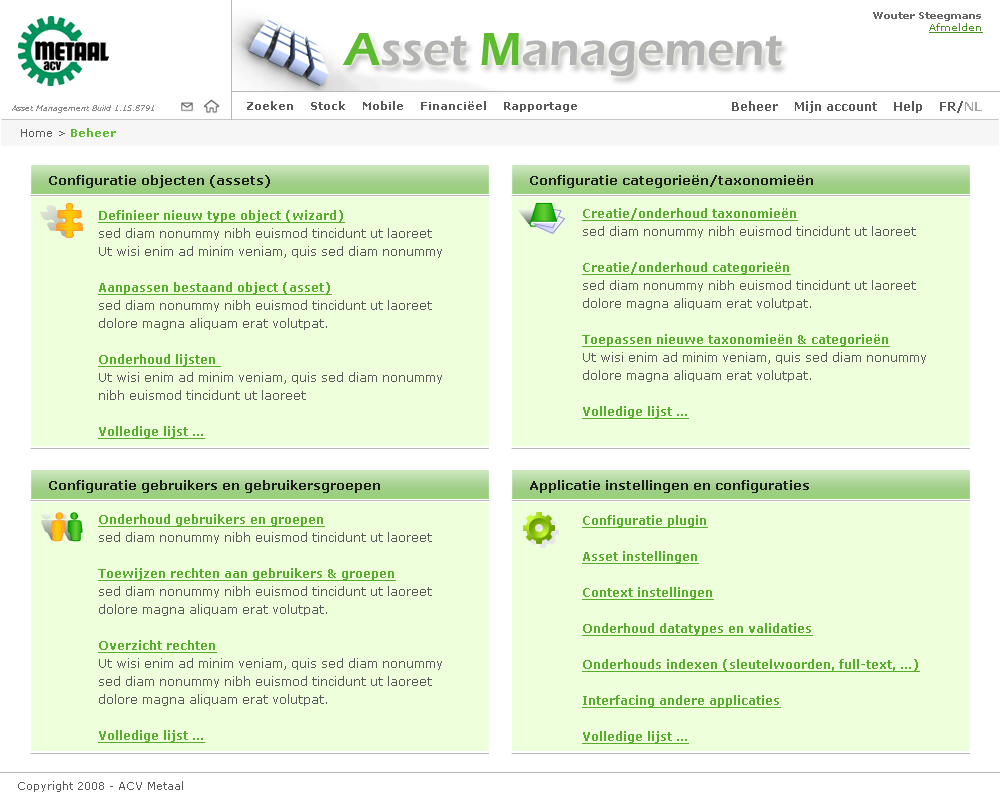
<style>
.page{position:relative;width:1000px;height:800px;background:#edffdb}
.page>*{position:absolute;margin:0}
.t1{font:10px "Verdana-Bold";color:#666666}
.t2{font:10px "Verdana";color:#488f24;text-decoration:underline}
.t3{font:48px "ErasITC-Demi";color:#b3b3b3}
.t4{font:48px "ErasITC-Demi";color:#5eba2f}
.t5{font:11px "Verdana-Bold";color:#595959}
.t6{font:12px "Verdana-Bold";color:#595959}
.t7{font:12px "Verdana-Bold";color:#a4a4a4}
.t8{font:8px "Verdana-Italic";color:#8c8c8c}
.t9{font:11px "Verdana";color:#595959}
.t10{font:11px "Verdana-Bold";color:#5eba2f}
.t11{font:13px "Verdana-Bold";color:#1e1e1e}
.t12{font:12px/18px "Verdana";color:#595959}
.t13{font:12px/18px "Verdana-Bold";color:#57ad2c;text-decoration:underline}
</style>
<div class="page">
<p class="t1" style="left:873px;top:12px;width:110px;height:21px;text-align:right">Wouter Steegmans<br><span class="t2">Afmelden</span></p>
<p class="t3" style="left:342px;top:33px;width:440px;height:44px"><span class="t4">A</span>sset <span class="t4">M</span>anagement</p>
<p class="t5" style="left:247px;top:101px;width:330px;height:11px">Zoeken    Stock    Mobile    Financiëel    Rapportage</p>
<p class="t6" style="left:732px;top:101px;width:250px;height:12px">Beheer    Mijn account    Help    FR/<span class="t7">NL</span></p>
<p class="t8" style="left:12px;top:105px;width:142px;height:8px">Asset Management Build 1.15.8791</p>
<p class="t9" style="left:21px;top:128px;width:95px;height:9px">Home &gt; <span class="t10">Beheer</span></p>
<p class="t11" style="left:49px;top:175px;width:221px;height:13px">Configuratie objecten (assets)</p>
<p class="t11" style="left:530px;top:175px;width:283px;height:13px">Configuratie categorieën/taxonomieën</p>
<p class="t12" style="left:582px;top:208px;width:344px;height:211px"><span class="t13">Creatie/onderhoud taxonomieën<br></span>sed diam nonummy nibh euismod tincidunt ut laoreet <br><br><span class="t13">Creatie/onderhoud categorieën<br></span>sed diam nonummy nibh euismod tincidunt ut laoreet <br>dolore magna aliquam erat volutpat. <br><br><span class="t13">Toepassen nieuwe taxonomieën &amp; categorieën<br></span>Ut wisi enim ad minim veniam, quis sed diam nonummy <br>dolore magna aliquam erat volutpat. <br><br><span class="t13">Volledige lijst ...</span></p>
<p class="t12" style="left:98px;top:210px;width:344px;height:229px"><span class="t13">Definieer nieuw type object (wizard)<br></span>sed diam nonummy nibh euismod tincidunt ut laoreet <br>Ut wisi enim ad minim veniam, quis sed diam nonummy<br><br><span class="t13">Aanpassen bestaand object (asset)<br></span>sed diam nonummy nibh euismod tincidunt ut laoreet <br>dolore magna aliquam erat volutpat. <br><br><span class="t13">Onderhoud lijsten <br></span>Ut wisi enim ad minim veniam, quis sed diam nonummy <br>nibh euismod tincidunt ut laoreet <br><br><span class="t13">Volledige lijst ...</span></p>
<p class="t11" style="left:49px;top:480px;width:331px;height:13px">Configuratie gebruikers en gebruikersgroepen</p>
<p class="t11" style="left:530px;top:480px;width:279px;height:13px">Applicatie instellingen en configuraties</p>
<p class="t12" style="left:98px;top:514px;width:344px;height:229px"><span class="t13">Onderhoud gebruikers en groepen<br></span>sed diam nonummy nibh euismod tincidunt ut laoreet <br><br><span class="t13">Toewijzen rechten aan gebruikers &amp; groepen<br></span>sed diam nonummy nibh euismod tincidunt ut laoreet <br>dolore magna aliquam erat volutpat. <br><br><span class="t13">Overzicht rechten<br></span>Ut wisi enim ad minim veniam, quis sed diam nonummy <br>sed diam nonummy nibh euismod tincidunt ut laoreet <br>dolore magna aliquam erat volutpat. <br><br><span class="t13">Volledige lijst ...</span></p>
<p class="t13" style="left:582px;top:515px;width:338px;height:229px">Configuratie plugin<br><br>Asset instellingen<br><br>Context instellingen<br><br>Onderhoud datatypes en validaties<br><br>Onderhouds indexen (sleutelwoorden, full-text, ...)<br><br>Interfacing andere applicaties<br><br>Volledige lijst ...</p>
<p class="t9" style="left:18px;top:781px;width:165px;height:11px">Copyright 2008 - ACV Metaal</p>
</div>
